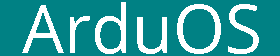
<style>
.page{position:relative;width:280px;height:56px;background:#008184}
.page>*{position:absolute;margin:0}
.t1{font:66.7px "OpenSans-Regular";color:#ffffff}
</style>
<div class="page">
<p class="t1" style="left:22px;top:2px;width:237px;height:52px">ArduOS</p>
</div>
